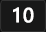
<style>
.page{position:relative;width:46px;height:32px;background:#181818}
.page>*{position:absolute;margin:0}
.t1{font:18.7px "MicrosoftYaHeiUI";color:#fffefe;font-weight:bold}
</style>
<div class="page">
<p class="t1" style="left:13px;top:7px;width:21px;height:16px">10</p>
</div>
